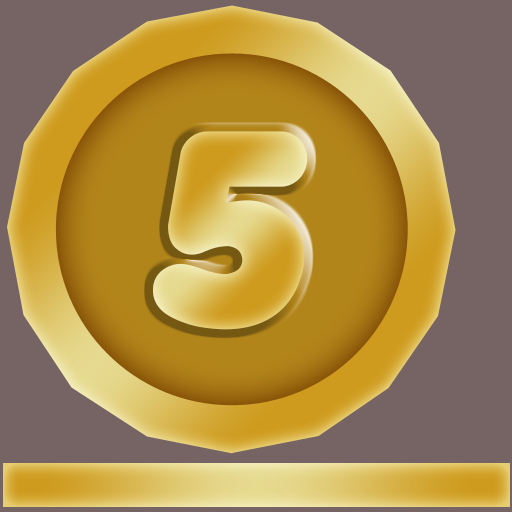
<style>
.page{position:relative;width:512px;height:512px;background:#766464}
.page>*{position:absolute;margin:0}
.t1{font:267.5px "Anja-Eliane-Nornal"}
</style>
<div class="page">
<p class="t1" style="left:153px;top:131px;width:155px;height:199px">5</p>
</div>
